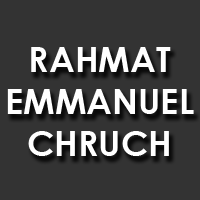
<style>
.page{position:relative;width:200px;height:200px;background:#333333}
.page>*{position:absolute;margin:0}
.t1{font:35px "CenturyGothic-Bold";color:#ffffff}
</style>
<div class="page">
<p class="t1" style="left:7px;top:47px;width:187px;height:109px;text-align:center">RAHMAT<br>EMMANUEL<br>CHRUCH</p>
</div>
